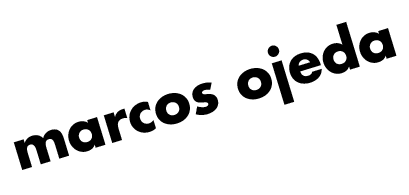
<style>
.page{position:relative;width:409px;height:195px;background:#ffffff}
.page>*{position:absolute;margin:0}
.t1{font:56.4px "FuturaLT-Bold";color:#000000}
</style>
<div class="page">
<p class="t1" style="left:13px;top:21px;width:384px;height:149px;rotate:-17deg">marcos ojeda</p>
</div>
